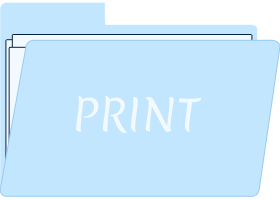
<style>
.page{position:relative;width:280px;height:200px;background:#c3e6ff}
.page>*{position:absolute;margin:0}
.t1{font:42.5px "Merienda-Regular_0_wt";color:#f2f9ff}
</style>
<div class="page">
<p class="t1" style="left:76px;top:96px;width:126px;height:37px">PRINT</p>
</div>
